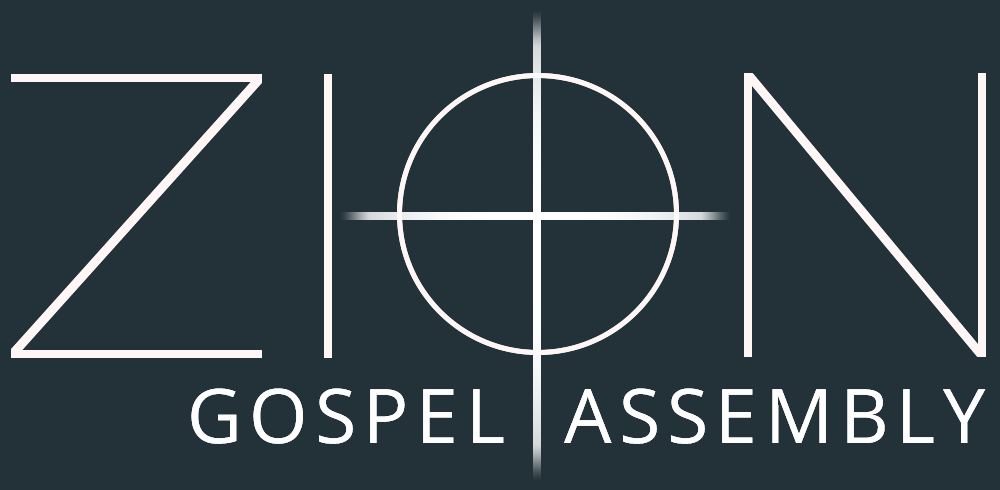
<style>
.page{position:relative;width:1000px;height:490px;background:#233138}
.page>*{position:absolute;margin:0}
.t1{font:75.2px "OpenSans";letter-spacing:0.1em;color:#ffffff}
</style>
<div class="page">
<p class="t1" style="left:191px;top:388px;width:313px;height:56px">GOSPEL</p>
<p class="t1" style="left:564px;top:388px;width:422px;height:56px">ASSEMBLY</p>
</div>
